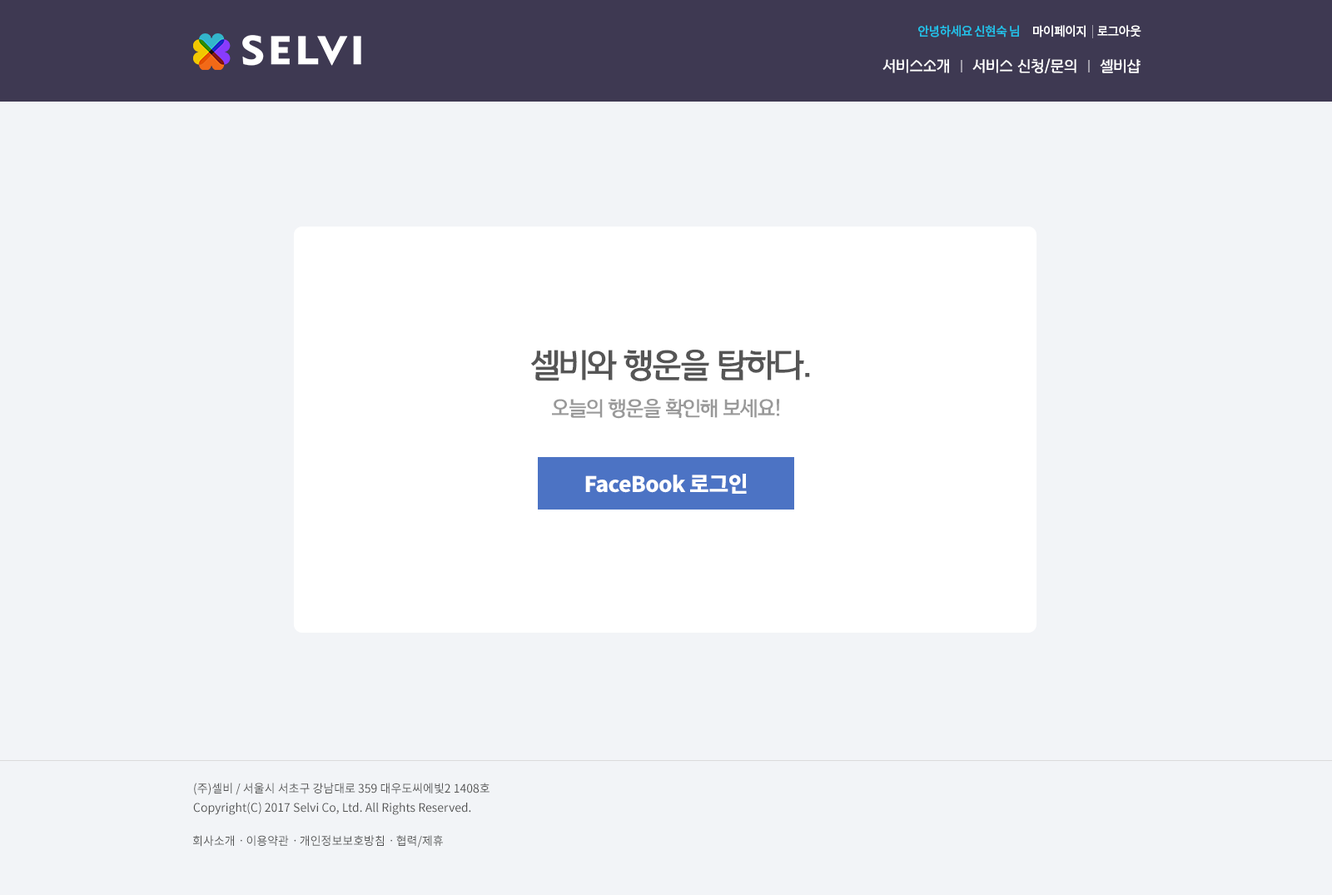
<style>
.page{position:relative;width:1332px;height:895px;background:#f2f4f7}
.page>*{position:absolute;margin:0}
.t1{font:12.5px "NotoSansCJKkr-Medium";letter-spacing:-0.05em;color:#21c0e8}
.t2{font:12.5px "NotoSansCJKkr-Medium";letter-spacing:-0.05em;color:#ffffff}
.t3{font:15px "KHNPHDotfR";color:#ffffff}
.t4{font:33.4px "KHNPHDotfR";letter-spacing:-0.05em;color:#555555}
.t5{font:20.4px "KHNPHDotfR";letter-spacing:-0.05em;color:#999999}
.t6{font:21.6px "NotoSansCJKkr-Black";letter-spacing:-0.025em;color:#ffffff}
.t7{font:11.7px/19.2px "NotoSansCJKkr-Regular";color:#515151}
.t8{font:11.7px "NotoSansCJKkr-Regular";color:#515151}
</style>
<div class="page">
<p class="t1" style="left:918px;top:25px;width:101px;height:12px">안녕하세요 신현숙 님</p>
<p class="t2" style="left:1033px;top:25px;width:53px;height:12px">마이페이지</p>
<p class="t2" style="left:1097px;top:25px;width:45px;height:12px">로그아웃</p>
<p class="t3" style="left:883px;top:58px;width:258px;height:16px">서비스소개     서비스 신청/문의     셀비샵</p>
<p class="t4" style="left:530px;top:349px;width:280px;height:32px">셀비와 행운을 탐하다.</p>
<p class="t5" style="left:552px;top:398px;width:227px;height:21px">오늘의 행운을 확인해 보세요!</p>
<p class="t6" style="left:585px;top:474px;width:162px;height:20px">FaceBook 로그인</p>
<p class="t7" style="left:193px;top:783px;width:297px;height:32px">(주)셀비 / 서울시 서초구 강남대로 359 대우도씨에빛2 1408호<br>Copyright(C) 2017 Selvi Co, Ltd. All Rights Reserved.</p>
<p class="t8" style="left:193px;top:835px;width:250px;height:13px">회사소개ㆍ이용약관ㆍ개인정보보호방침ㆍ협력/제휴</p>
</div>
